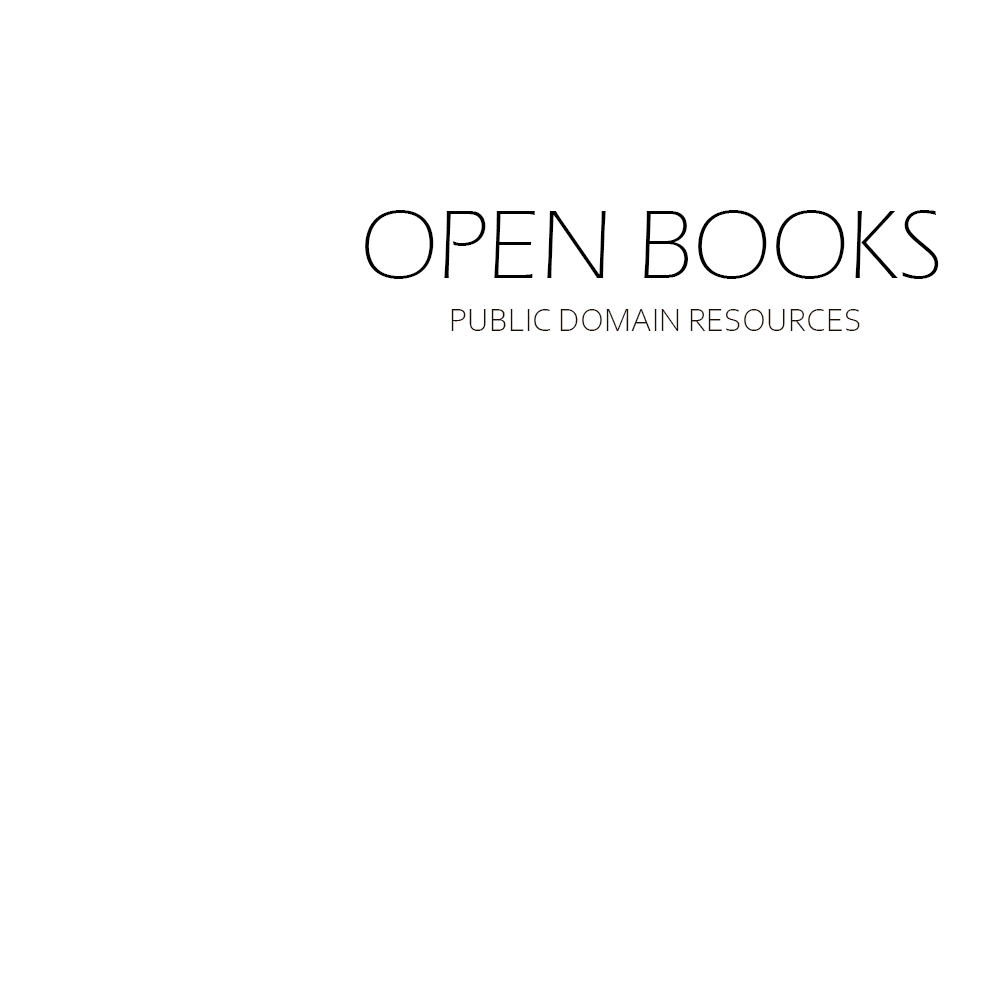
<style>
.page{position:relative;width:1000px;height:1000px;background:#ffffff}
.page>*{position:absolute;margin:0}
.t1{font:100px "ErasITC-Light";color:#000000}
.t2{font:33.3px "CorbelLight";color:#1c0f08}
</style>
<div class="page">
<p class="t1" style="left:365px;top:210px;width:574px;height:69px">OPEN BOOKS</p>
<p class="t2" style="left:451px;top:309px;width:409px;height:22px">PUBLIC DOMAIN RESOURCES</p>
</div>
